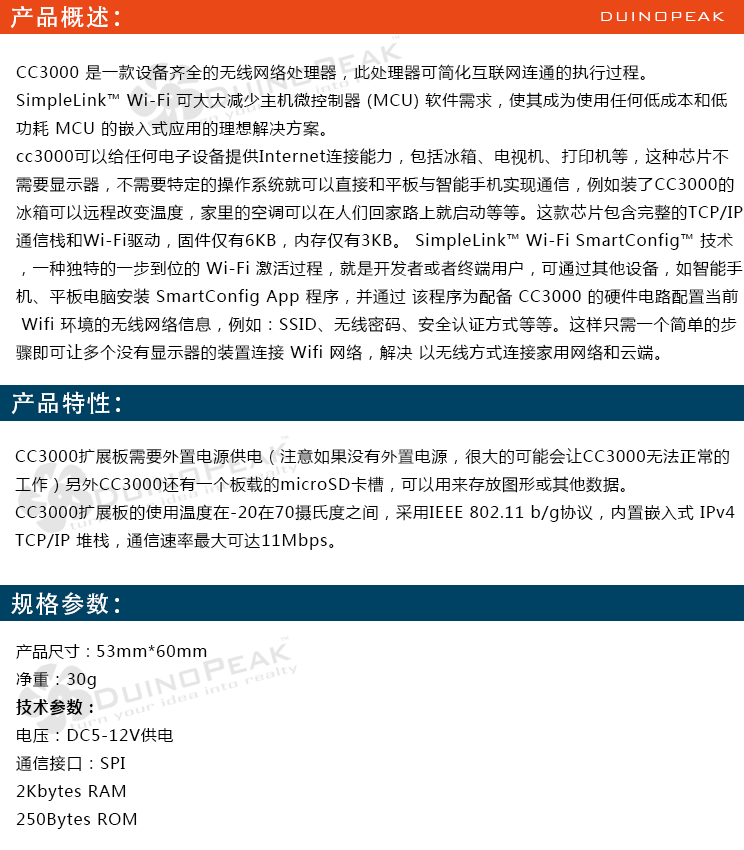
<style>
.page{position:relative;width:744px;height:850px;background:#ffffff}
.page>*{position:absolute;margin:0}
.t1{font:24px "AdobeHeitiStd-Regular";letter-spacing:0.05em;color:#ffffff}
.t2{font:18px "BankGothicBT-Light";letter-spacing:0.05em;color:#ffffff}
.t3{font:16px "MicrosoftYaHei";letter-spacing:0.05em;color:#000000}
.t4{font:16px "MicrosoftYaHei";color:#000000}
.t5{font:16px "MicrosoftYaHei-Bold";letter-spacing:0.05em;color:#000000}
</style>
<div class="page">
<p class="t1" style="left:10px;top:6px;width:109px;height:23px">产品概述：</p>
<p class="t2" style="left:601px;top:12px;width:124px;height:9px">DUINOPEAK</p>
<p class="t3" style="left:16px;top:64px;width:727px;height:297px">CC3000 是一款设备齐全的无线网络处理器，此处理器可简化互联网连通的执行过程。 <br>SimpleLink™ Wi-Fi 可大大减少主机微控制器 (MCU) 软件需求，使其成为使用任何低成本和低<br>功耗 MCU 的嵌入式应用的理想解决方案。<br>cc3000可以给任何电子设备提供Internet连接能力，包括冰箱、电视机、打印机等，这种芯片不<br>需要显示器，不需要特定的操作系统就可以直接和平板与智能手机实现通信，例如装了CC3000的<br>冰箱可以远程改变温度，家里的空调可以在人们回家路上就启动等等。这款芯片包含完整的TCP/IP<br>通信栈和Wi-Fi驱动，固件仅有6KB，内存仅有3KB。 SimpleLink™ Wi-Fi SmartConfig™ 技术<br>，一种独特的一步到位的 Wi-Fi 激活过程，就是开发者或者终端用户，可通过其他设备，如智能手<br>机、平板电脑安装 SmartConfig App 程序，并通过 该程序为配备 CC3000 的硬件电路配置当前<br> Wifi 环境的无线网络信息，例如：SSID、无线密码、安全认证方式等等。这样只需一个简单的步<br>骤即可让多个没有显示器的装置连接 Wifi 网络，解决 以无线方式连接家用网络和云端。</p>
<p class="t1" style="left:11px;top:391px;width:109px;height:24px">产品特性：</p>
<p class="t3" style="left:15px;top:448px;width:720px;height:102px">CC3000扩展板需要外置电源供电（注意如果没有外置电源，很大的可能会让CC3000无法正常的<br>工作）另外CC3000还有一个板载的microSD卡槽，可以用来存放图形或其他数据。<br>CC3000扩展板的使用温度在-20在70摄氏度之间，采用IEEE 802.11 b/g协议，内置嵌入式 IPv4 <br>TCP/IP 堆栈，通信速率最大可达11Mbps。</p>
<p class="t1" style="left:11px;top:592px;width:108px;height:23px">规格参数：</p>
<p class="t3" style="left:16px;top:644px;width:191px;height:185px"><span class="t4">产品尺寸：</span>53mm*60mm<br>净重：30g<br><span class="t5">技术参数：<br></span>电压：DC5-12V供电<br>通信接口：SPI<br>2Kbytes RAM<br>250Bytes ROM</p>
</div>
